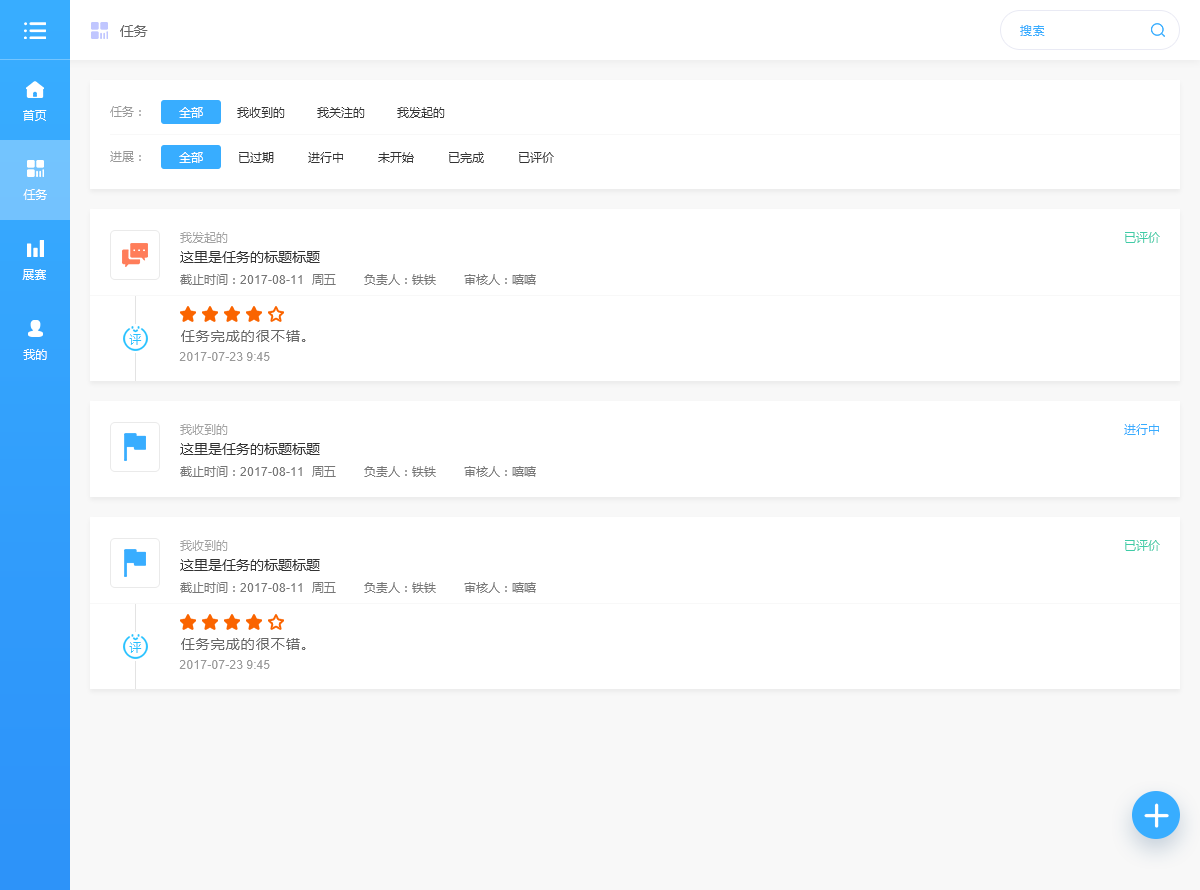
<style>
.page{position:relative;width:1200px;height:890px;background:#ffffff}
.page>*{position:absolute;margin:0}
.t1{font:14px "MicrosoftYaHei";color:#666666}
.t2{font:12px "MicrosoftYaHei";letter-spacing:0.05em;color:#38adff}
.t3{font:12px "MicrosoftYaHei";color:#ffffff}
.t4{font:12px "MicrosoftYaHei";color:#999999}
.t5{font:12px "MicrosoftYaHei";color:#333333}
.t6{font:12px "MicrosoftYaHei";color:#a3a3a3}
.t7{font:12px "MicrosoftYaHei";color:#3fcca7}
.t8{font:14px "MicrosoftYaHei";color:#333333}
.t9{font:12px "MicrosoftYaHei";color:#777777}
.t10{font:12px "ArialMT";color:#777777}
.t11{font:12px "MicrosoftYaHei";letter-spacing:0.075em;color:#25c1ff}
.t12{font:14px "MicrosoftYaHei";letter-spacing:0.075em;color:#666666}
.t13{font:12px "ArialMT";color:#999999}
.t14{font:12px "MicrosoftYaHei";color:#38adff}
</style>
<div class="page">
<p class="t1" style="left:120px;top:25px;width:28px;height:12px">任务</p>
<p class="t2" style="left:1020px;top:25px;width:25px;height:11px">搜索</p>
<p class="t3" style="left:23px;top:110px;width:24px;height:11px">首页</p>
<p class="t4" style="left:110px;top:106px;width:31px;height:11px">任务：</p>
<p class="t3" style="left:179px;top:107px;width:24px;height:11px">全部</p>
<p class="t5" style="left:237px;top:107px;width:48px;height:11px">我收到的</p>
<p class="t5" style="left:317px;top:107px;width:48px;height:11px">我关注的</p>
<p class="t5" style="left:397px;top:107px;width:48px;height:11px">我发起的</p>
<p class="t4" style="left:110px;top:151px;width:31px;height:11px">进展：</p>
<p class="t3" style="left:179px;top:152px;width:24px;height:11px">全部</p>
<p class="t5" style="left:239px;top:152px;width:35px;height:11px">已过期</p>
<p class="t5" style="left:308px;top:152px;width:35px;height:11px">进行中</p>
<p class="t5" style="left:378px;top:152px;width:36px;height:11px">未开始</p>
<p class="t5" style="left:449px;top:152px;width:35px;height:11px">已完成</p>
<p class="t5" style="left:519px;top:152px;width:35px;height:11px">已评价</p>
<p class="t3" style="left:23px;top:189px;width:24px;height:11px">任务</p>
<p class="t6" style="left:180px;top:232px;width:48px;height:11px">我发起的</p>
<p class="t7" style="left:1125px;top:232px;width:35px;height:11px">已评价</p>
<p class="t8" style="left:180px;top:251px;width:140px;height:12px">这里是任务的标题标题</p>
<p class="t3" style="left:22px;top:269px;width:24px;height:11px">展赛</p>
<p class="t9" style="left:180px;top:274px;width:356px;height:11px">截止时间：<span class="t10">2017-08-11</span>  周五       负责人：铁铁       审核人：嘻嘻</p>
<p class="t11" style="left:129px;top:334px;width:13px;height:11px">评</p>
<p class="t12" style="left:181px;top:330px;width:125px;height:12px">任务完成的很不错。</p>
<p class="t3" style="left:23px;top:349px;width:24px;height:11px">我的</p>
<p class="t13" style="left:179px;top:352px;width:91px;height:9px">2017-07-23 9:45</p>
<p class="t6" style="left:180px;top:424px;width:48px;height:11px">我收到的</p>
<p class="t14" style="left:1124px;top:424px;width:35px;height:11px">进行中</p>
<p class="t8" style="left:180px;top:443px;width:140px;height:12px">这里是任务的标题标题</p>
<p class="t9" style="left:180px;top:466px;width:356px;height:11px">截止时间：<span class="t10">2017-08-11</span>  周五       负责人：铁铁       审核人：嘻嘻</p>
<p class="t6" style="left:180px;top:540px;width:48px;height:11px">我收到的</p>
<p class="t7" style="left:1125px;top:540px;width:35px;height:11px">已评价</p>
<p class="t8" style="left:180px;top:559px;width:140px;height:12px">这里是任务的标题标题</p>
<p class="t9" style="left:180px;top:582px;width:356px;height:11px">截止时间：<span class="t10">2017-08-11</span>  周五       负责人：铁铁       审核人：嘻嘻</p>
<p class="t12" style="left:181px;top:638px;width:125px;height:12px">任务完成的很不错。</p>
<p class="t11" style="left:129px;top:642px;width:13px;height:11px">评</p>
<p class="t13" style="left:179px;top:660px;width:91px;height:9px">2017-07-23 9:45</p>
</div>
